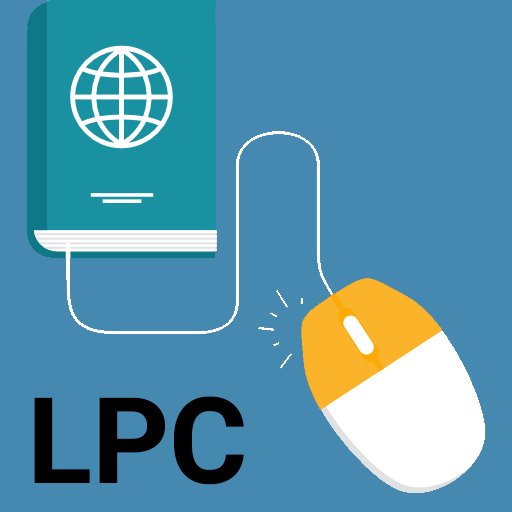
<style>
.page{position:relative;width:512px;height:512px;background:#4589b0}
.page>*{position:absolute;margin:0}
.t1{font:120px "Roboto-Bold";color:#000000}
</style>
<div class="page">
<p class="t1" style="left:34px;top:396px;width:210px;height:89px">LPC</p>
</div>
